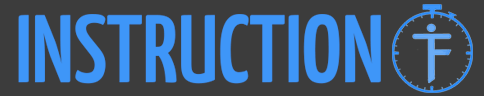
<style>
.page{position:relative;width:484px;height:96px;background:#3c3c3c}
.page>*{position:absolute;margin:0}
.t1{font:95.9px "YanoneKaffeesatz-SemiBold";color:#3e96f8}
</style>
<div class="page">
<p class="t1" style="left:18px;top:14px;width:363px;height:70px">INSTRUCTION</p>
</div>
